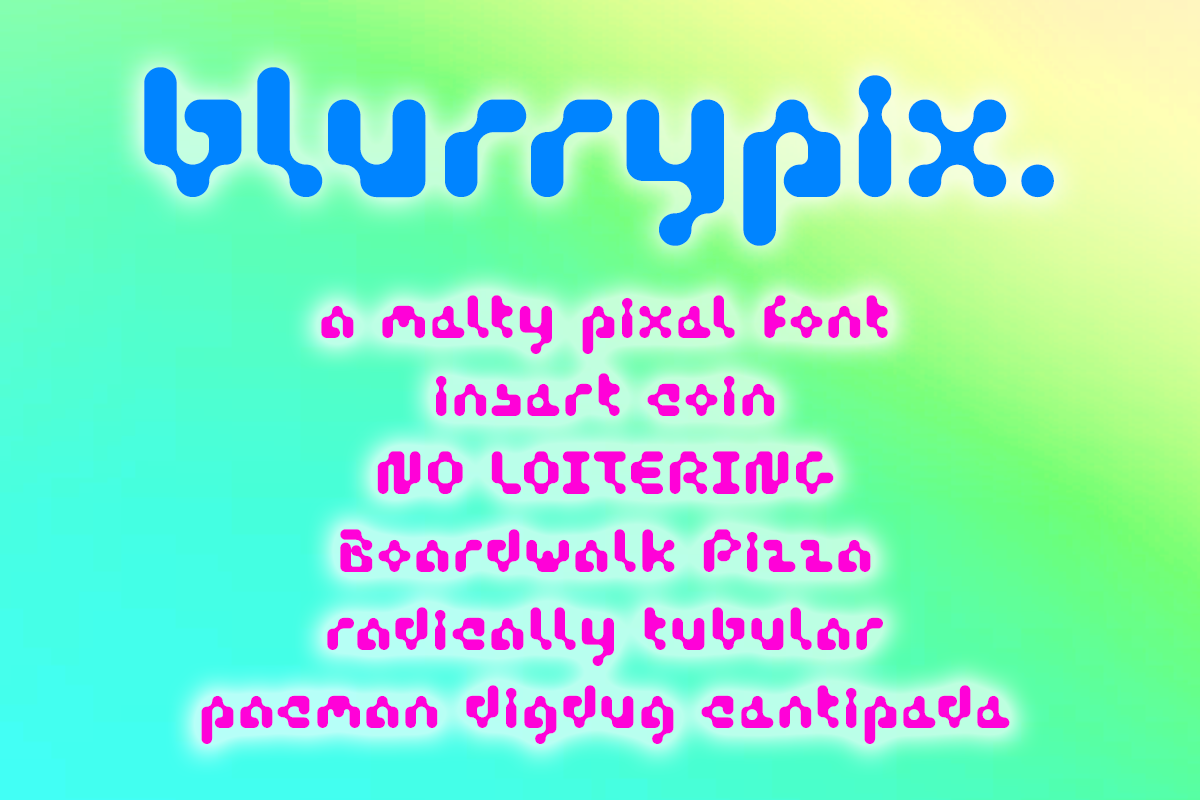
<style>
.page{position:relative;width:1200px;height:800px}
.page>*{position:absolute;margin:0}
.t1{font:202.9px "BlurrypixRegular";letter-spacing:0.04em;color:#0084ff}
.t2{font:66.9px/78px "BlurrypixRegular";letter-spacing:0.06em;color:#ff01d8}
</style>
<div class="page">
<p class="t1" style="left:144px;top:67px;width:910px;height:179px">blurrypix.</p>
<p class="t2" style="left:201px;top:295px;width:809px;height:449px;text-align:center">a melty pixel font<br>insert coin<br>NO LOITERING<br>Boardwalk Pizza<br>radically tubular<br>pacman digdug centipede</p>
</div>
